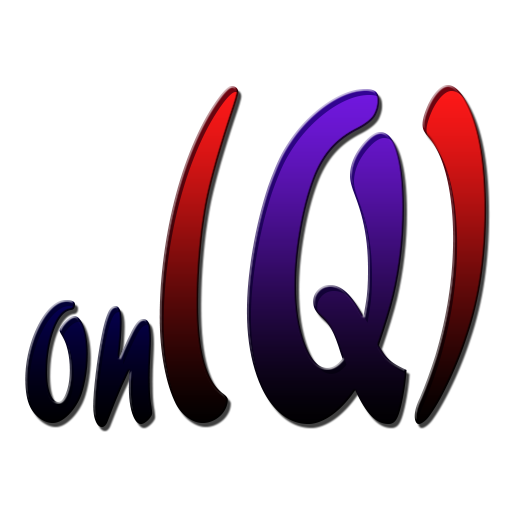
<style>
.page{position:relative;width:512px;height:512px;background:#ffffff}
.page>*{position:absolute;margin:0}
.t1{font:250px "ForteMT";scale:0.5 1}
.t2{font:500px "ForteMT";scale:0.5 1}
</style>
<div class="page">
<p class="t1" style="left:25px;top:85px;width:462px;height:342px">on<span class="t2">(</span><span class="t2">Q</span><span class="t2">)</span></p>
</div>
